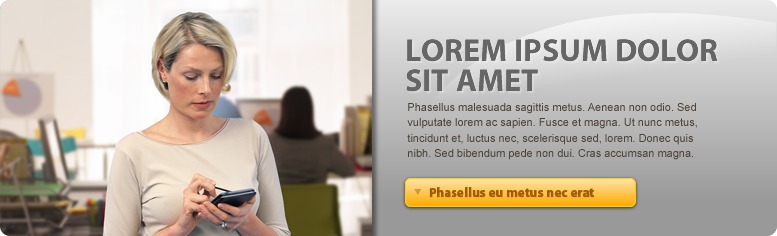
<style>
.page{position:relative;width:777px;height:236px}
.page>*{position:absolute;margin:0}
.t1{font:32px/30.4px "MyriadPro-Bold";color:#666666}
.t2{font:11px/15.5px "ArialMT";color:#4c4335}
.t3{font:15px "MyriadPro-Bold";color:#a45900}
</style>
<div class="page">
<p class="t1" style="left:406px;top:39px;width:312px;height:53px">LOREM IPSUM DOLOR <br>SIT AMET</p>
<p class="t2" style="left:407px;top:103px;width:290px;height:57px">Phasellus malesuada sagittis metus. Aenean non odio. Sed <br>vulputate lorem ac sapien. Fusce et magna. Ut nunc metus, <br>tincidunt et, luctus nec, scelerisque sed, lorem. Donec quis <br>nibh. Sed bibendum pede non dui. Cras accumsan magna.</p>
<p class="t3" style="left:429px;top:187px;width:165px;height:11px">Phasellus eu metus nec erat</p>
</div>
